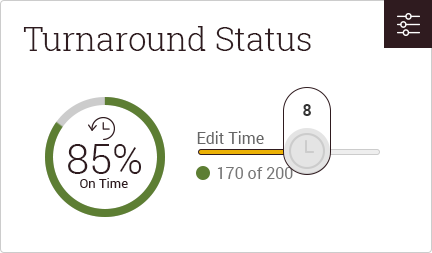
<style>
.page{position:relative;width:432px;height:253px;background:#ffffff}
.page>*{position:absolute;margin:0}
.t1{font:33px "RobotoSlab-Light";color:#2f1b1f}
.t2{font:16px "Roboto-Bold";color:#333333}
.t3{font:16px "Roboto-Regular";color:#666666}
.t4{font:41.7px "Roboto-Light";color:#2f1b1f}
.t5{font:16px "Roboto-Regular";color:#767676}
.t6{font:13px "Roboto-Regular";color:#2f1b1f}
</style>
<div class="page">
<p class="t1" style="left:23px;top:26px;width:288px;height:25px">Turnaround Status</p>
<p class="t2" style="left:303px;top:104px;width:8px;height:12px">8</p>
<p class="t3" style="left:197px;top:131px;width:67px;height:13px">Edit Time</p>
<p class="t4" style="left:68px;top:144px;width:73px;height:30px">85%</p>
<p class="t5" style="left:217px;top:167px;width:76px;height:12px">170 of 200</p>
<p class="t6" style="left:80px;top:178px;width:48px;height:10px">On Time</p>
</div>
